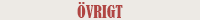
<style>
.page{position:relative;width:200px;height:20px;background:#edeae5}
.page>*{position:absolute;margin:0}
.t1{font:16px "BernardMT-Condensed";color:#b14542}
</style>
<div class="page">
<p class="t1" style="left:77px;top:2px;width:46px;height:16px">ÖVRIGT</p>
</div>
